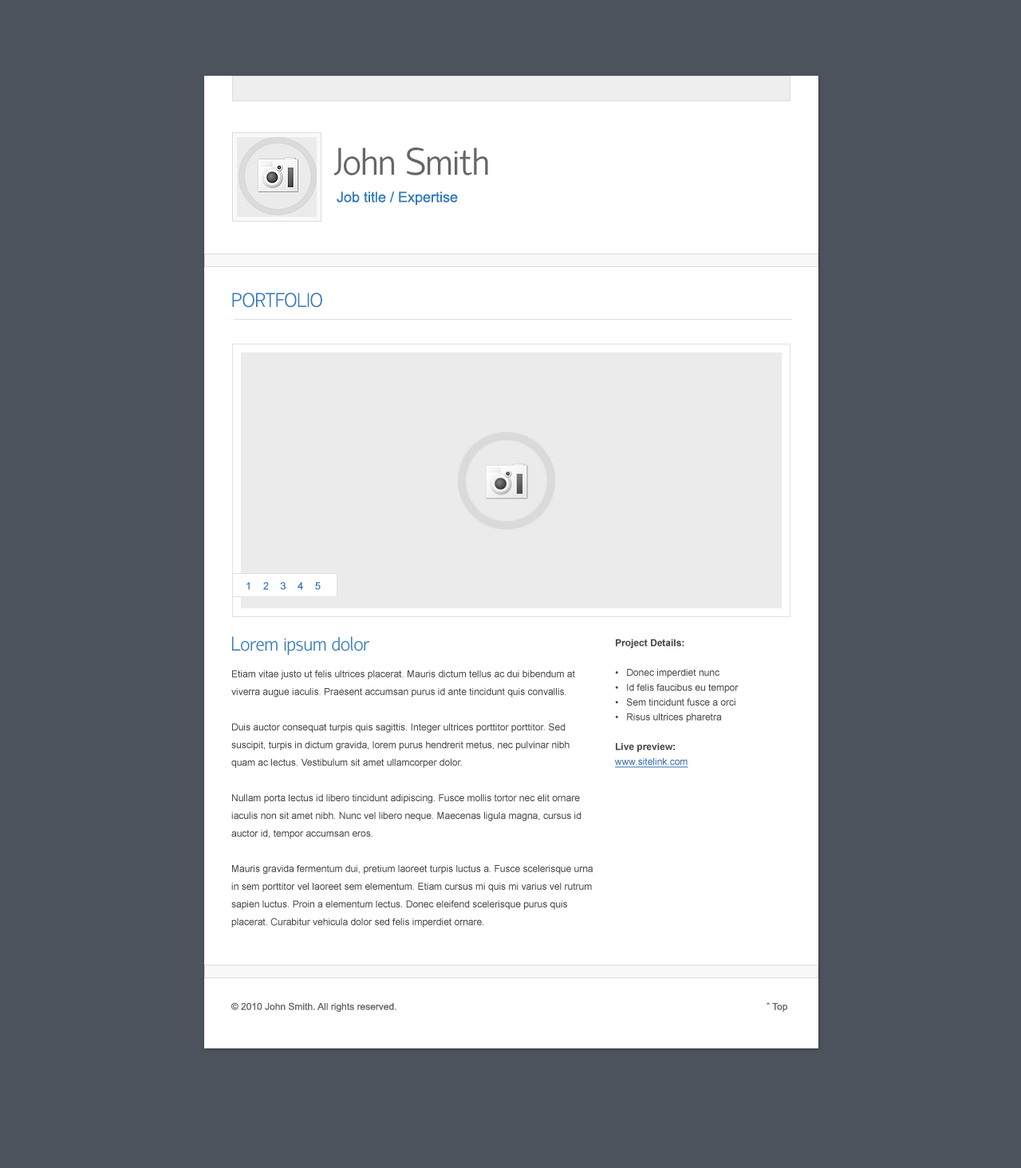
<style>
.page{position:relative;width:1021px;height:1168px;background:#4c535c}
.page>*{position:absolute;margin:0}
.t1{font:38.3px "MyriadPro-Regular";color:#666666}
.t2{font:14.4px "ArialMT";color:#3279bb}
.t3{font:19.9px "MyriadPro-Regular";color:#3279bb}
.t4{font:10.4px "ArialMT";color:#2f6ab3}
.t5{font:9.6px/14.8px "ArialMT";color:#454545}
.t6{font:9.6px/14.8px "Arial-BoldMT";color:#454545}
.t7{font:9.6px/14.8px "ArialMT";color:#2f6ab3;text-decoration:underline}
.t8{font:9.6px/17.7px "ArialMT";color:#454545}
.t9{font:9.6px "ArialMT";color:#666666}
</style>
<div class="page">
<p class="t1" style="left:333px;top:148px;width:155px;height:27px">John Smith</p>
<p class="t2" style="left:337px;top:191px;width:121px;height:14px">Job title / Expertise</p>
<p class="t3" style="left:232px;top:293px;width:90px;height:15px">PORTFOLIO</p>
<p class="t4" style="left:246px;top:582px;width:75px;height:8px">1    2    3    4    5</p>
<p class="t3" style="left:232px;top:636px;width:137px;height:19px">Lorem ipsum dolor</p>
<p class="t5" style="left:615px;top:639px;width:123px;height:129px"><span class="t6">Project Details:<br></span>  <br>•   Donec imperdiet nunc<br>•   Id felis faucibus eu tempor<br>•   Sem tincidunt fusce a orci <br>•   Risus ultrices pharetra<br><br><span class="t6">Live preview:<br></span><span class="t7">www.sitelink.com</span></p>
<p class="t8" style="left:231px;top:670px;width:361px;height:257px">Etiam vitae justo ut felis ultrices placerat. Mauris dictum tellus ac dui bibendum at <br>viverra augue iaculis. Praesent accumsan purus id ante tincidunt quis convallis.<br><br>Duis auctor consequat turpis quis sagittis. Integer ultrices porttitor porttitor. Sed <br>suscipit, turpis in dictum gravida, lorem purus hendrerit metus, nec pulvinar nibh <br>quam ac lectus. Vestibulum sit amet ullamcorper dolor.<br><br>Nullam porta lectus id libero tincidunt adipiscing. Fusce mollis tortor nec elit ornare <br>iaculis non sit amet nibh. Nunc vel libero neque. Maecenas ligula magna, cursus id <br>auctor id, tempor accumsan eros.<br><br>Mauris gravida fermentum dui, pretium laoreet turpis luctus a. Fusce scelerisque urna <br>in sem porttitor vel laoreet sem elementum. Etiam cursus mi quis mi varius vel rutrum <br>sapien luctus. Proin a elementum lectus. Donec eleifend scelerisque purus quis <br>placerat. Curabitur vehicula dolor sed felis imperdiet ornare.</p>
<p class="t9" style="left:230px;top:1002px;width:166px;height:11px">© 2010 John Smith. All rights reserved.</p>
<p class="t9" style="left:766px;top:1002px;width:21px;height:10px">ˆ Top</p>
</div>
